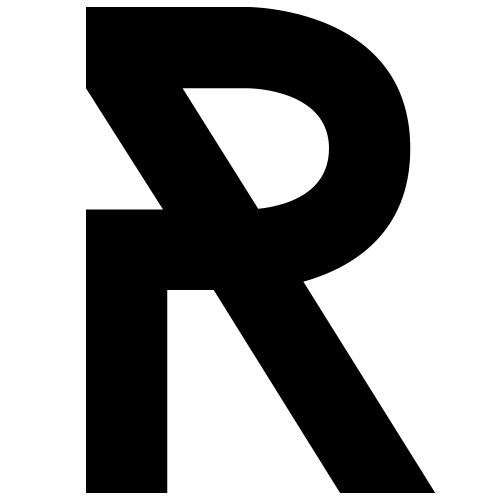
<style>
.page{position:relative;width:500px;height:500px;background:#ffffff}
.page>*{position:absolute;margin:0}
.t1{font:694.4px "Droidiga";letter-spacing:-0.01em;color:#000000}
</style>
<div class="page">
<p class="t1" style="left:86px;top:7px;width:350px;height:486px">r</p>
</div>
